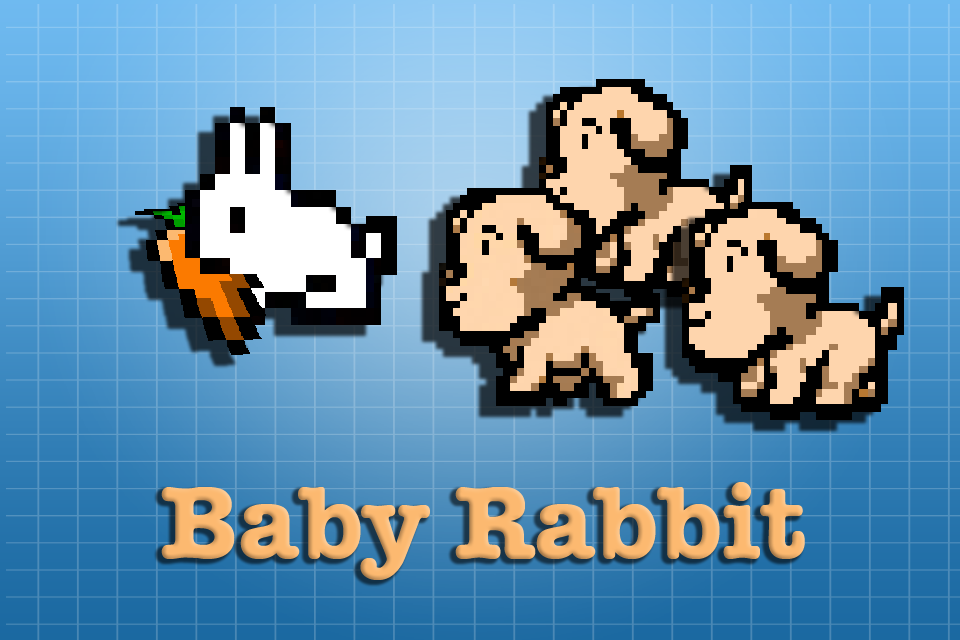
<style>
.page{position:relative;width:960px;height:640px}
.page>*{position:absolute;margin:0}
.t1{font:105px "AmericanTypewriter-Bold";color:#fcb970}
</style>
<div class="page">
<p class="t1" style="left:161px;top:482px;width:644px;height:98px">Baby Rabbit</p>
</div>
